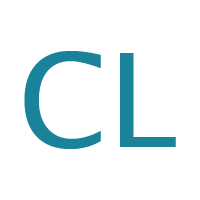
<style>
.page{position:relative;width:200px;height:200px;background:#ffffff}
.page>*{position:absolute;margin:0}
.t1{font:130px "LucidaGrande";color:#1a8299}
</style>
<div class="page">
<p class="t1" style="left:24px;top:51px;width:152px;height:99px">CL</p>
</div>
